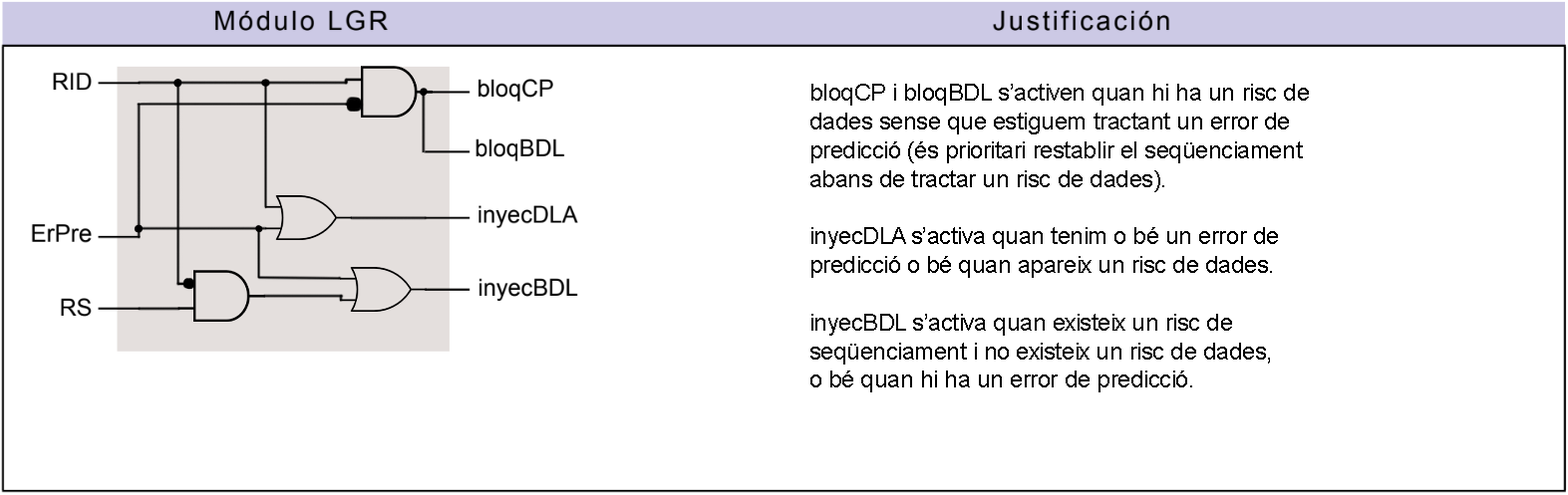
<style>
.page{position:relative;width:1568px;height:495px;background:#ffffff}
.page>*{position:absolute;margin:0}
.t1{font:23.9px "ArialMT";letter-spacing:-0.02em;color:#000000}
</style>
<div class="page">
<p class="t1" style="left:810px;top:84px;width:499px;height:309px">bloqCP i bloqBDL s’activen quan hi ha un risc de<br>dades sense que estiguem tractant un error de<br>predicció (és prioritari restablir el seqüenciament<br>abans de tractar un risc de dades).<br><br>inyecDLA s’activa quan tenim o bé un error de<br>predicció o bé quan apareix un risc de dades.<br><br>inyecBDL s’activa quan existeix un risc de <br>seqüenciament i no existeix un risc de dades,<br>o bé quan hi ha un error de predicció.</p>
</div>
